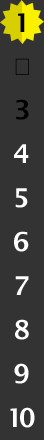
<style>
.page{position:relative;width:44px;height:440px;background:#333333}
.page>*{position:absolute;margin:0}
.t1{font:26px "LucidaSans-Demi";color:#000000}
.t2{font:26px "LucidaSans";color:#000000}
.t3{font:26px "LucidaSans-Demi";color:#ffffff}
</style>
<div class="page">
<p class="t1" style="left:18px;top:13px;width:7px;height:19px">1</p>
<p class="t2" style="left:15px;top:58px;width:14px;height:17px">２</p>
<p class="t1" style="left:16px;top:99px;width:13px;height:21px">3</p>
<p class="t3" style="left:14px;top:144px;width:15px;height:19px">4</p>
<p class="t3" style="left:15px;top:188px;width:13px;height:20px">5</p>
<p class="t3" style="left:14px;top:231px;width:15px;height:21px">6</p>
<p class="t3" style="left:15px;top:276px;width:14px;height:19px">7</p>
<p class="t3" style="left:15px;top:319px;width:14px;height:21px">8</p>
<p class="t3" style="left:14px;top:363px;width:15px;height:21px">9</p>
<p class="t3" style="left:10px;top:407px;width:25px;height:21px">10</p>
</div>
